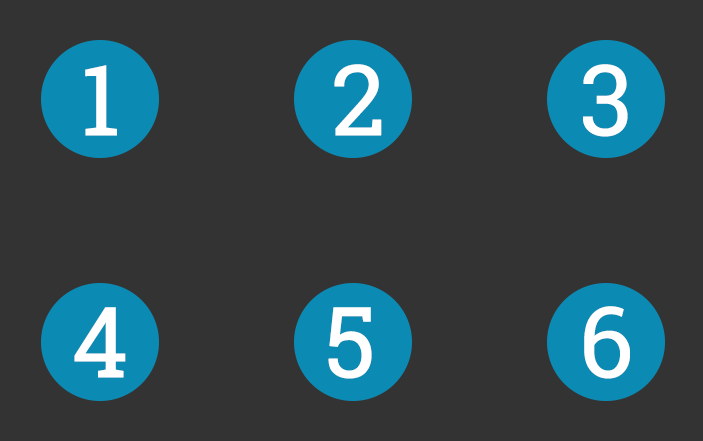
<style>
.page{position:relative;width:703px;height:441px;background:#333333}
.page>*{position:absolute;margin:0}
.t1{font:98.1px "RobotoSlab-Regular";color:#ffffff;text-transform:uppercase;font-weight:bold}
</style>
<div class="page">
<p class="t1" style="left:85px;top:65px;width:32px;height:71px">1</p>
<p class="t1" style="left:334px;top:64px;width:48px;height:72px">2</p>
<p class="t1" style="left:583px;top:64px;width:45px;height:73px">3</p>
<p class="t1" style="left:74px;top:307px;width:52px;height:71px">4</p>
<p class="t1" style="left:328px;top:307px;width:44px;height:72px">5</p>
<p class="t1" style="left:584px;top:306px;width:46px;height:73px">6</p>
</div>
